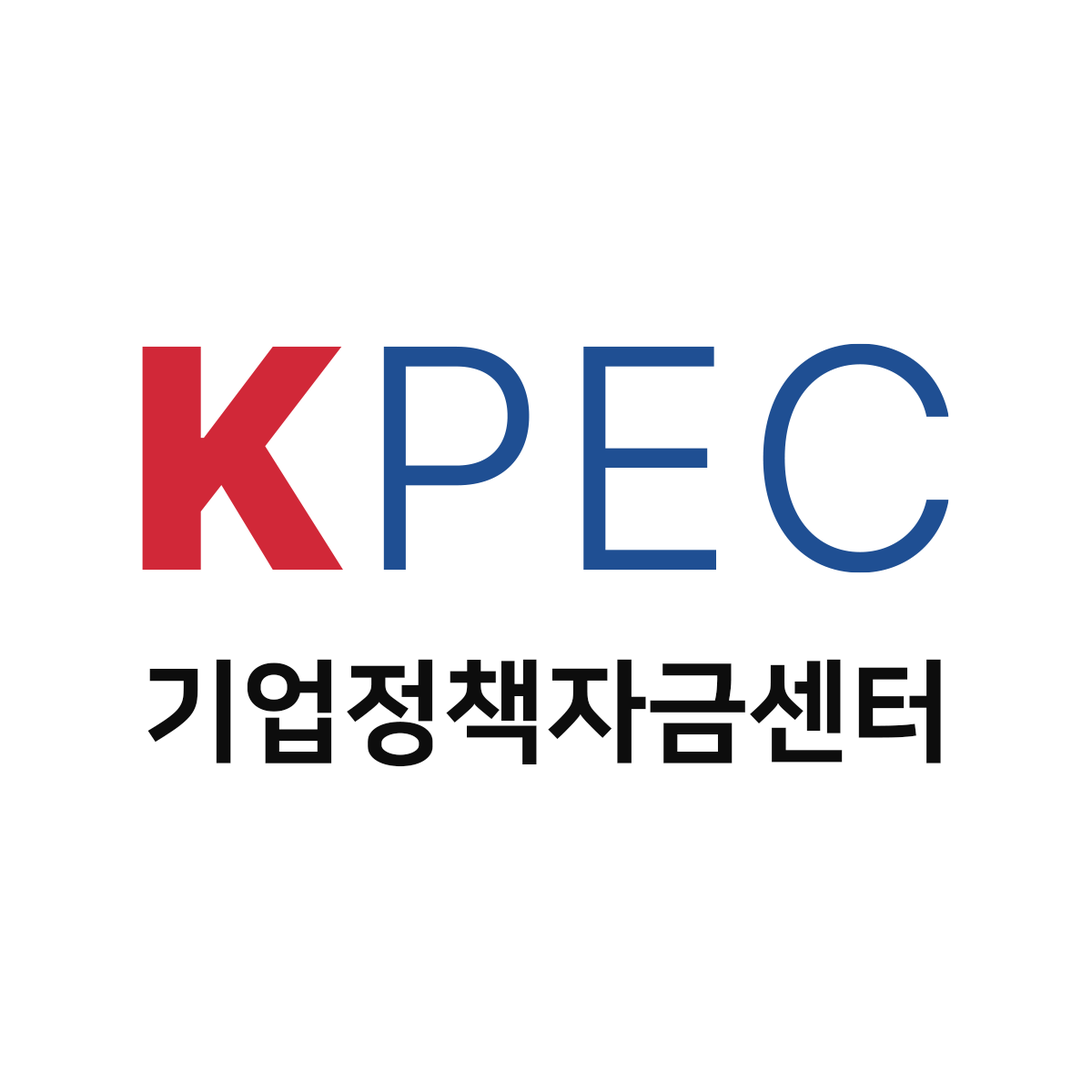
<style>
.page{position:relative;width:1092px;height:1092px;background:#ffffff}
.page>*{position:absolute;margin:0}
.t1{font:111.4px "NanumSquareEB";color:#0d0d0d}
</style>
<div class="page">
<p class="t1" style="left:147px;top:659px;width:794px;height:108px">기업정책자금센터</p>
</div>
